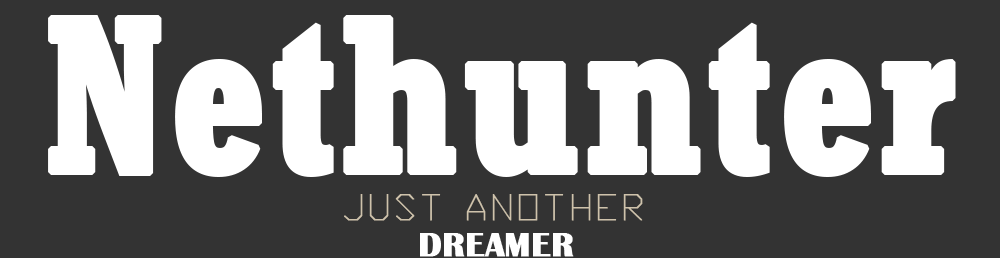
<style>
.page{position:relative;width:1000px;height:258px;background:#333333}
.page>*{position:absolute;margin:0}
.t1{font:220px "Rockwell-CondensedBold";color:#ffffff;font-weight:bold}
.t2{font:35px "Proxy1";color:#cec2ab;font-weight:bold}
.t3{font:35px "BritannicBold";color:#ffffff;font-weight:bold}
</style>
<div class="page">
<p class="t1" style="left:48px;top:15px;width:908px;height:162px">Nethunter</p>
<p class="t2" style="left:344px;top:194px;width:299px;height:27px">JUST ANOTHER</p>
<p class="t3" style="left:420px;top:233px;width:154px;height:24px">DREAMER</p>
</div>
